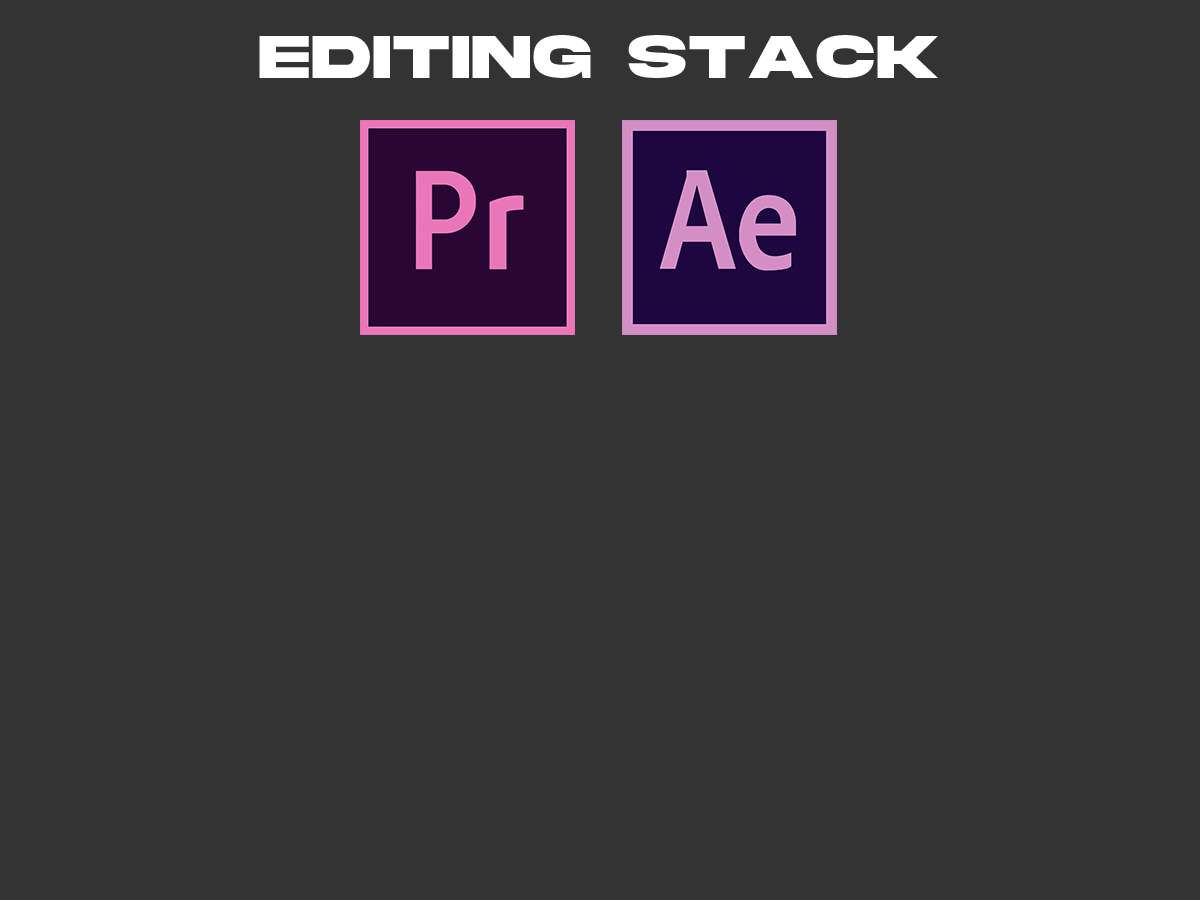
<style>
.page{position:relative;width:1200px;height:900px;background:#333333}
.page>*{position:absolute;margin:0}
.t1{font:63.9px "AkiraExpanded-SuperBold";letter-spacing:0.04em;color:#ffffff}
</style>
<div class="page">
<p class="t1" style="left:259px;top:35px;width:679px;height:43px">EDITING STACK</p>
</div>
